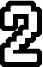
<style>
.page{position:relative;width:43px;height:67px;background:#000000}
.page>*{position:absolute;margin:0}
.t1{font:72px "Cubic_11";letter-spacing:0.1em;color:#ffffff;font-weight:bold}
</style>
<div class="page">
<p class="t1" style="left:4px;top:5px;width:33px;height:57px">2</p>
</div>
